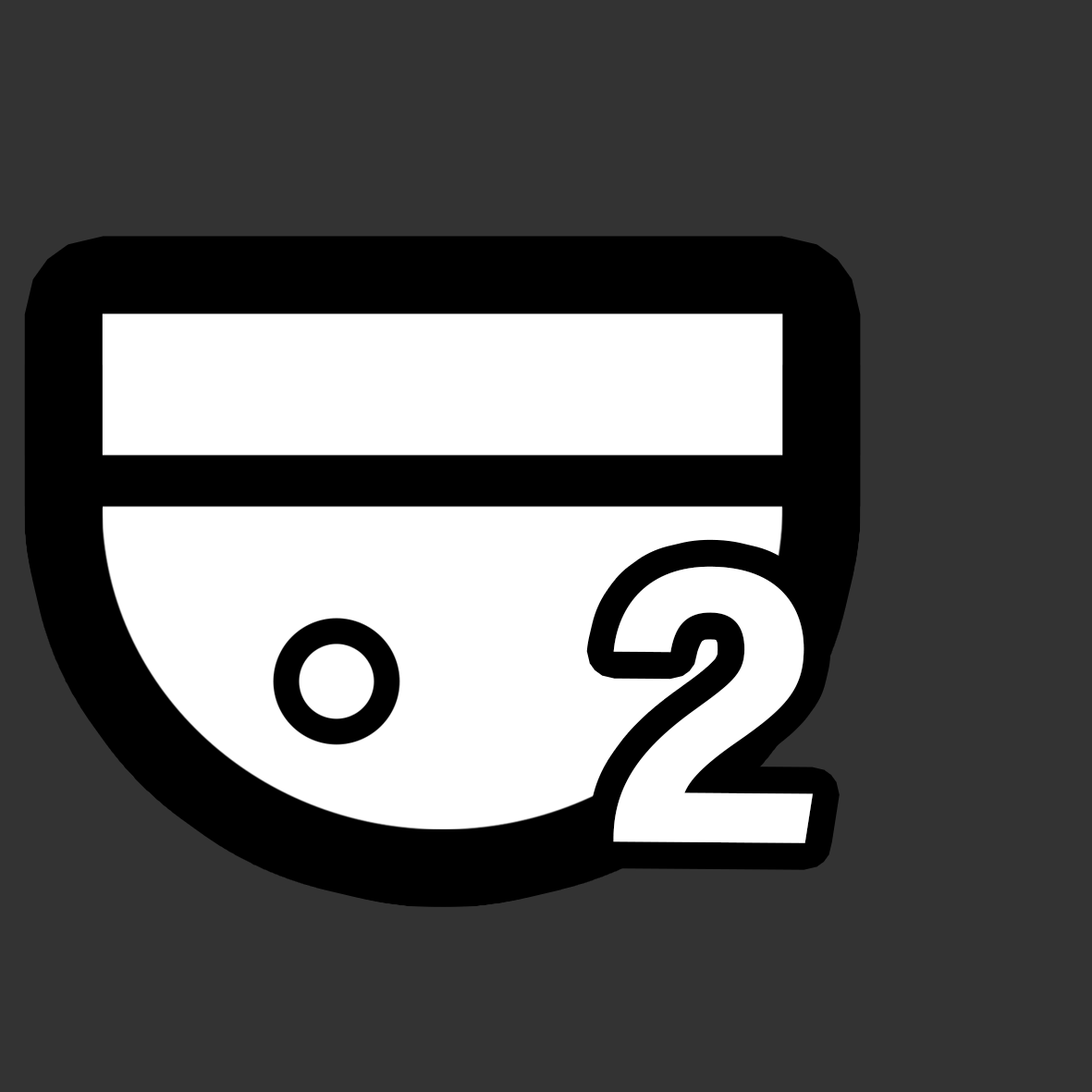
<style>
.page{position:relative;width:1092px;height:1092px;background:#333333}
.page>*{position:absolute;margin:0}
.t1{font:411.3px "AcuminConcept-Bold";color:#ffffff}
</style>
<div class="page">
<p class="t1" style="left:613px;top:566px;width:200px;height:277px">2</p>
</div>
